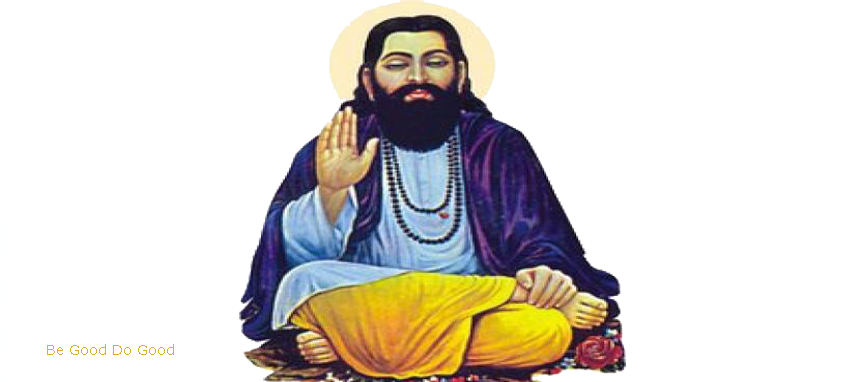
<style>
.page{position:relative;width:847px;height:382px;background:#ffffff}
.page>*{position:absolute;margin:0}
.t1{font:14px "MSReferenceSansSerif";color:#dbb02e}
</style>
<div class="page">
<p class="t1" style="left:47px;top:344px;width:127px;height:11px">Be Good Do Good</p>
</div>
